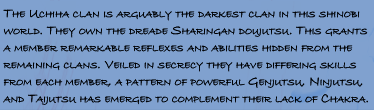
<style>
.page{position:relative;width:374px;height:110px;background:#80a1cf}
.page>*{position:absolute;margin:0}
.t1{font:14.2px "BradleyHandITC";color:#000000;font-variant:small-caps}
</style>
<div class="page">
<p class="t1" style="left:3px;top:9px;width:365px;height:96px">The Uchiha clan is arguably the darkest clan in this shinobi<br>world. They own the dreade Sharingan doujutsu. This grants<br>a member remarkable reflexes and abilities hidden from the <br>remaining clans. Veiled in secrecy they have differing skills<br>from each member, a pattern of powerful Genjutsu, Ninjutsu,<br>and Taijutsu has emerged to complement their lack of Chakra.</p>
<p class="t1" style="left:3px;top:9px;width:365px;height:96px">The Uchiha clan is arguably the darkest clan in this shinobi<br>world. They own the dreade Sharingan doujutsu. This grants<br>a member remarkable reflexes and abilities hidden from the <br>remaining clans. Veiled in secrecy they have differing skills<br>from each member, a pattern of powerful Genjutsu, Ninjutsu,<br>and Taijutsu has emerged to complement their lack of Chakra.</p>
</div>
